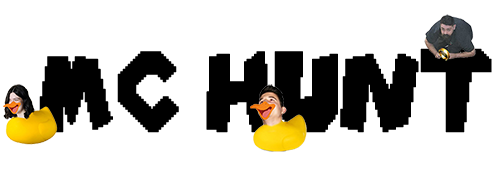
<style>
.page{position:relative;width:500px;height:169px;background:#ffffff}
.page>*{position:absolute;margin:0}
.t1{font:28.7px "Typeface-Mario-World-Pixel-Filled";color:#000000;font-weight:bold}
</style>
<div class="page">
<p class="t1" style="left:37px;top:48px;width:455px;height:85px">MC HUNT</p>
</div>
